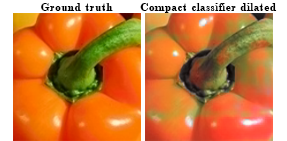
<style>
.page{position:relative;width:287px;height:141px}
.page>*{position:absolute;margin:0}
.t1{font:12px "Cmb10";color:#000000}
</style>
<div class="page">
<p class="t1" style="left:41px;top:3px;width:72px;height:8px">Ground truth</p>
<p class="t1" style="left:140px;top:3px;width:137px;height:10px">Compact classifier dilated</p>
</div>
